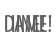
<style>
.page{position:relative;width:56px;height:56px;background:#ffffff}
.page>*{position:absolute;margin:0}
.t1{font:24px "MyriadPro-Cond";color:#5c5c5c}
</style>
<div class="page">
<p class="t1" style="left:5px;top:15px;width:47px;height:17px">DAME!</p>
<p class="t1" style="left:12px;top:15px;width:33px;height:17px">IINE!</p>
</div>
